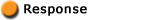
<style>
.page{position:relative;width:150px;height:20px;background:#ffffff}
.page>*{position:absolute;margin:0}
.t1{font:12px "Verdana";letter-spacing:0.05em;color:#000000;font-weight:bold}
</style>
<div class="page">
<p class="t1" style="left:24px;top:4px;width:63px;height:12px">Response</p>
</div>
